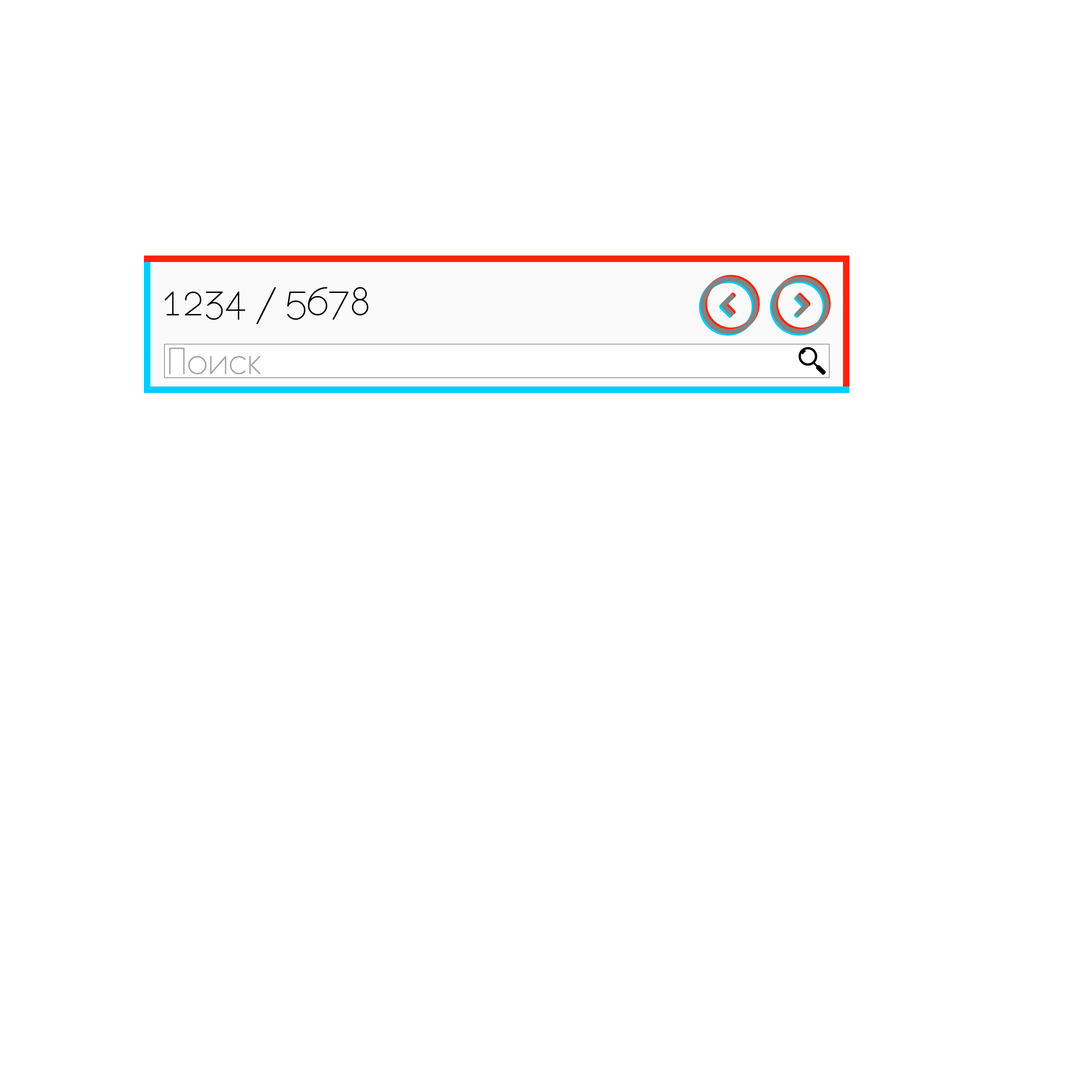
<style>
.page{position:relative;width:1092px;height:1092px;background:#ffffff}
.page>*{position:absolute;margin:0}
.t1{font:46.2px "Eurofurencelight";color:#000000}
.t2{font:43.4px "Eurofurencelight";color:#a1a1a1}
</style>
<div class="page">
<p class="t1" style="left:165px;top:287px;width:203px;height:37px">1234 / 5678</p>
<p class="t2" style="left:169px;top:348px;width:91px;height:26px">Поиск</p>
</div>
